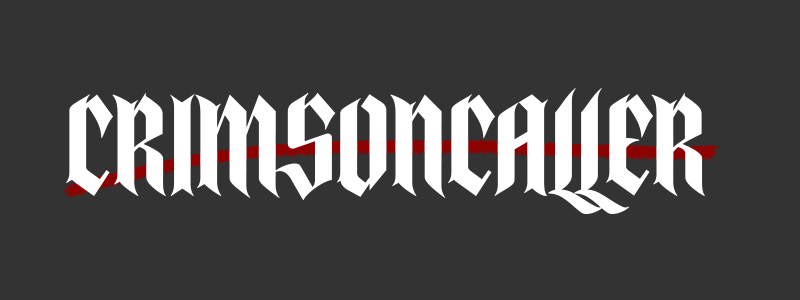
<style>
.page{position:relative;width:800px;height:300px;background:#333333}
.page>*{position:absolute;margin:0}
.t1{font:119.2px "Cattedrale-Demo-Regular";color:#ffffff}
</style>
<div class="page">
<p class="t1" style="left:66px;top:87px;width:639px;height:127px">CRIMSONCALLER</p>
</div>
